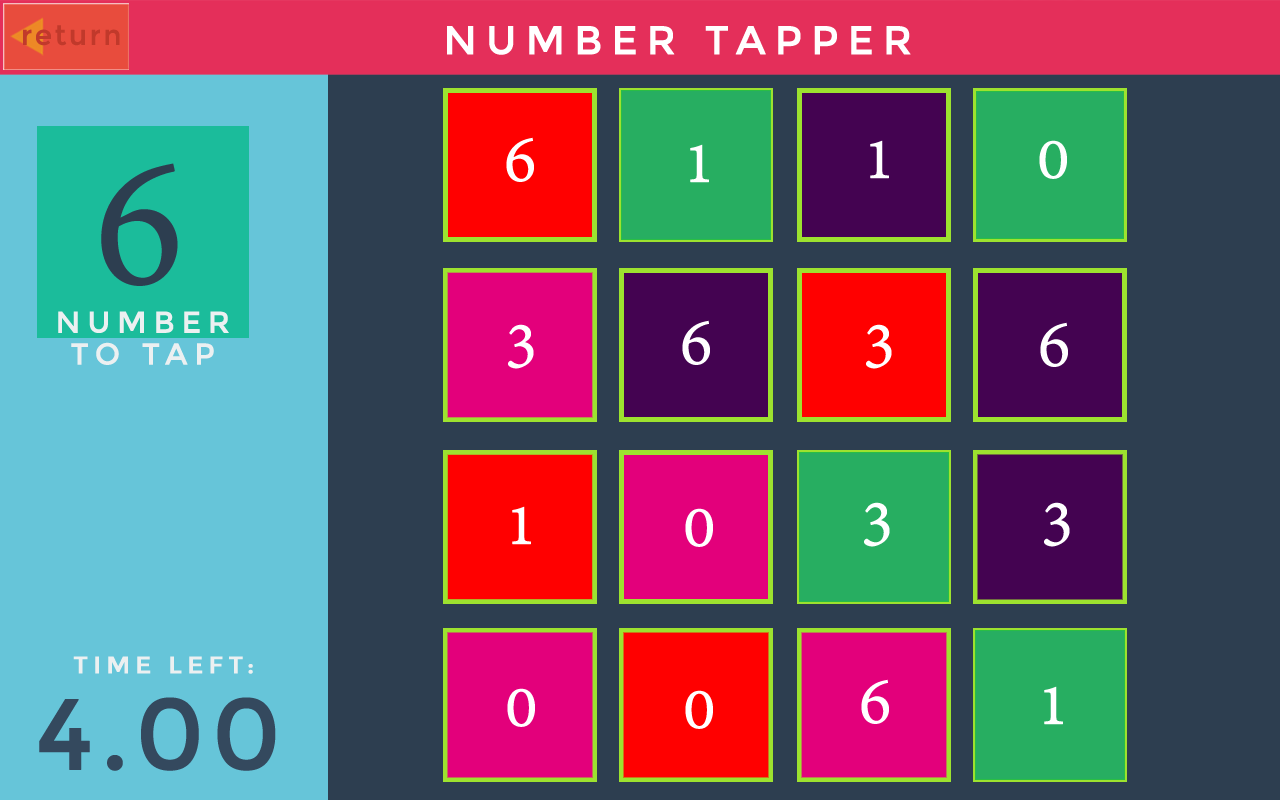
<style>
.page{position:relative;width:1280px;height:800px;background:#2d3e50}
.page>*{position:absolute;margin:0}
.t1{font:40px "Montserrat-Regular";letter-spacing:0.2em;color:#ffffff;text-transform:uppercase;font-weight:bold}
.t2{font:72px "AdobeDevanagari-Regular";letter-spacing:0.2em;color:#ffffff;text-transform:uppercase;font-weight:bold}
.t3{font:200px "AdobeDevanagari-Regular";letter-spacing:0.2em;color:#2d3e50;text-transform:uppercase;font-weight:bold}
.t4{font:30px/31.9px "Montserrat-Regular";letter-spacing:0.2em;color:#ecf0f1;text-transform:uppercase;font-weight:bold}
.t5{font:24px "Montserrat-Regular";letter-spacing:0.2em;color:#ecf0f1;text-transform:uppercase;font-weight:bold}
.t6{font:100px "Montserrat-Regular";letter-spacing:0.05em;color:#34495e;text-transform:uppercase;font-weight:bold}
</style>
<div class="page">
<p class="t1" style="left:447px;top:26px;width:464px;height:29px">Number Tapper</p>
<p class="t2" style="left:506px;top:137px;width:28px;height:45px">6</p>
<p class="t2" style="left:690px;top:144px;width:19px;height:39px">1</p>
<p class="t2" style="left:870px;top:140px;width:19px;height:39px">1</p>
<p class="t2" style="left:1039px;top:140px;width:28px;height:39px">0</p>
<p class="t3" style="left:101px;top:163px;width:77px;height:123px">6</p>
<p class="t4" style="left:58px;top:311px;width:171px;height:54px;text-align:center">Number <br>to tap</p>
<p class="t2" style="left:508px;top:324px;width:26px;height:45px">3</p>
<p class="t2" style="left:682px;top:320px;width:28px;height:45px">6</p>
<p class="t2" style="left:866px;top:324px;width:26px;height:45px">3</p>
<p class="t2" style="left:1040px;top:322px;width:28px;height:45px">6</p>
<p class="t2" style="left:512px;top:506px;width:19px;height:39px">1</p>
<p class="t2" style="left:685px;top:508px;width:28px;height:39px">0</p>
<p class="t2" style="left:864px;top:502px;width:26px;height:45px">3</p>
<p class="t2" style="left:1044px;top:502px;width:26px;height:45px">3</p>
<p class="t5" style="left:73px;top:656px;width:180px;height:18px">Time Left:</p>
<p class="t2" style="left:507px;top:688px;width:28px;height:39px">0</p>
<p class="t2" style="left:861px;top:679px;width:28px;height:45px">6</p>
<p class="t2" style="left:1044px;top:686px;width:19px;height:39px">1</p>
<p class="t6" style="left:39px;top:697px;width:237px;height:74px">4.00</p>
<p class="t2" style="left:685px;top:690px;width:28px;height:39px">0</p>
</div>
